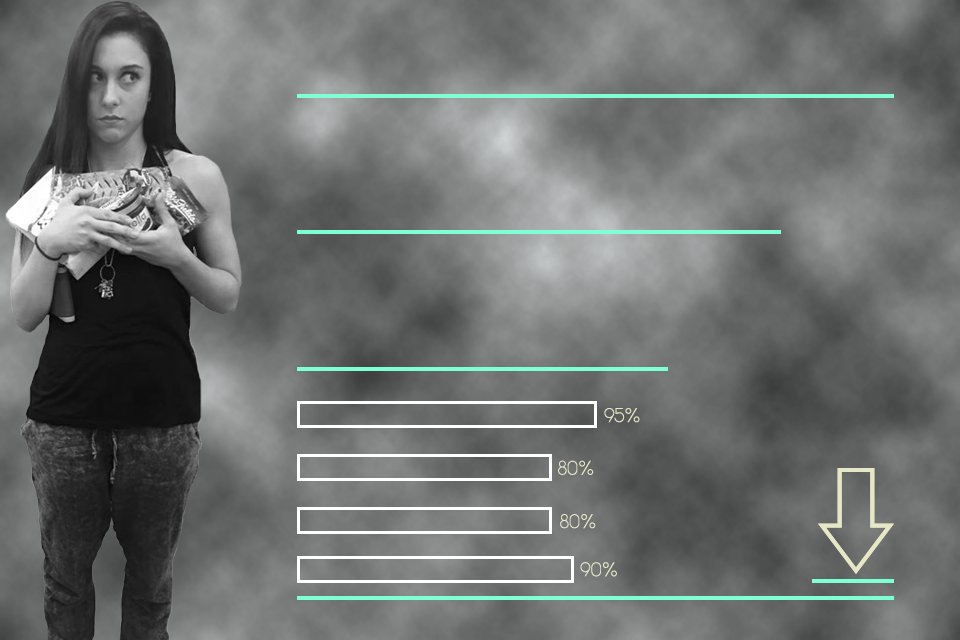
<style>
.page{position:relative;width:960px;height:640px}
.page>*{position:absolute;margin:0}
.t1{font:20px "Alcubierre";color:#e6e7c7}
</style>
<div class="page">
<p class="t1" style="left:604px;top:408px;width:36px;height:15px">95%</p>
<p class="t1" style="left:558px;top:460px;width:36px;height:15px">80%</p>
<p class="t1" style="left:560px;top:514px;width:36px;height:15px">80%</p>
<p class="t1" style="left:580px;top:562px;width:37px;height:15px">90%</p>
</div>
